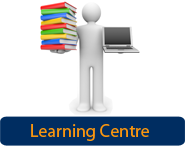
<style>
.page{position:relative;width:185px;height:146px;background:#ffffff}
.page>*{position:absolute;margin:0}
.t1{font:18px "MyriadPro-Regular";color:#f8950f}
</style>
<div class="page">
<p class="t1" style="left:31px;top:124px;width:118px;height:17px">Learning Centre</p>
</div>
